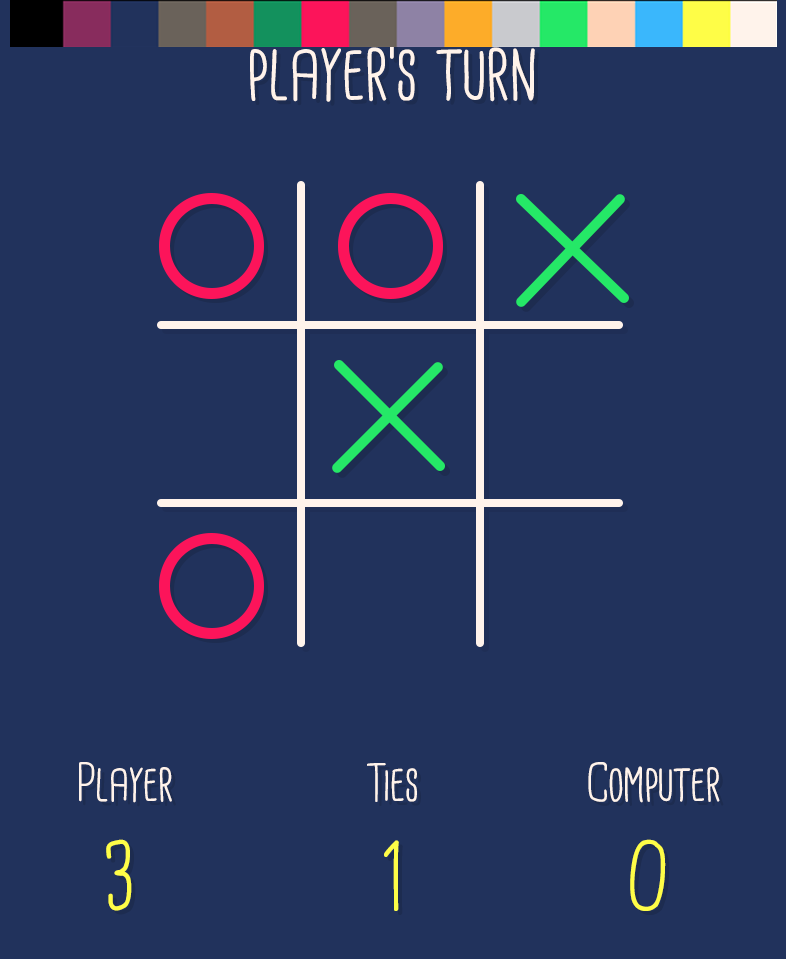
<style>
.page{position:relative;width:786px;height:959px;background:#21325c}
.page>*{position:absolute;margin:0}
.t1{font:80px "CardenioModern-Reg";letter-spacing:-0.01em;color:#fff3eb}
.t2{font:52px "CardenioModern-Reg";letter-spacing:-0.01em;color:#fff3eb}
.t3{font:90px "CardenioModern-Reg";letter-spacing:-0.01em;color:#fefd47}
</style>
<div class="page">
<p class="t1" style="left:250px;top:41px;width:285px;height:61px">player’s turn</p>
<p class="t2" style="left:79px;top:762px;width:93px;height:41px">Player</p>
<p class="t2" style="left:367px;top:763px;width:50px;height:39px">Ties</p>
<p class="t2" style="left:588px;top:762px;width:132px;height:41px">Computer</p>
<p class="t3" style="left:106px;top:839px;width:26px;height:72px">3</p>
<p class="t3" style="left:384px;top:840px;width:15px;height:71px">1</p>
<p class="t3" style="left:630px;top:839px;width:36px;height:72px">0</p>
</div>
